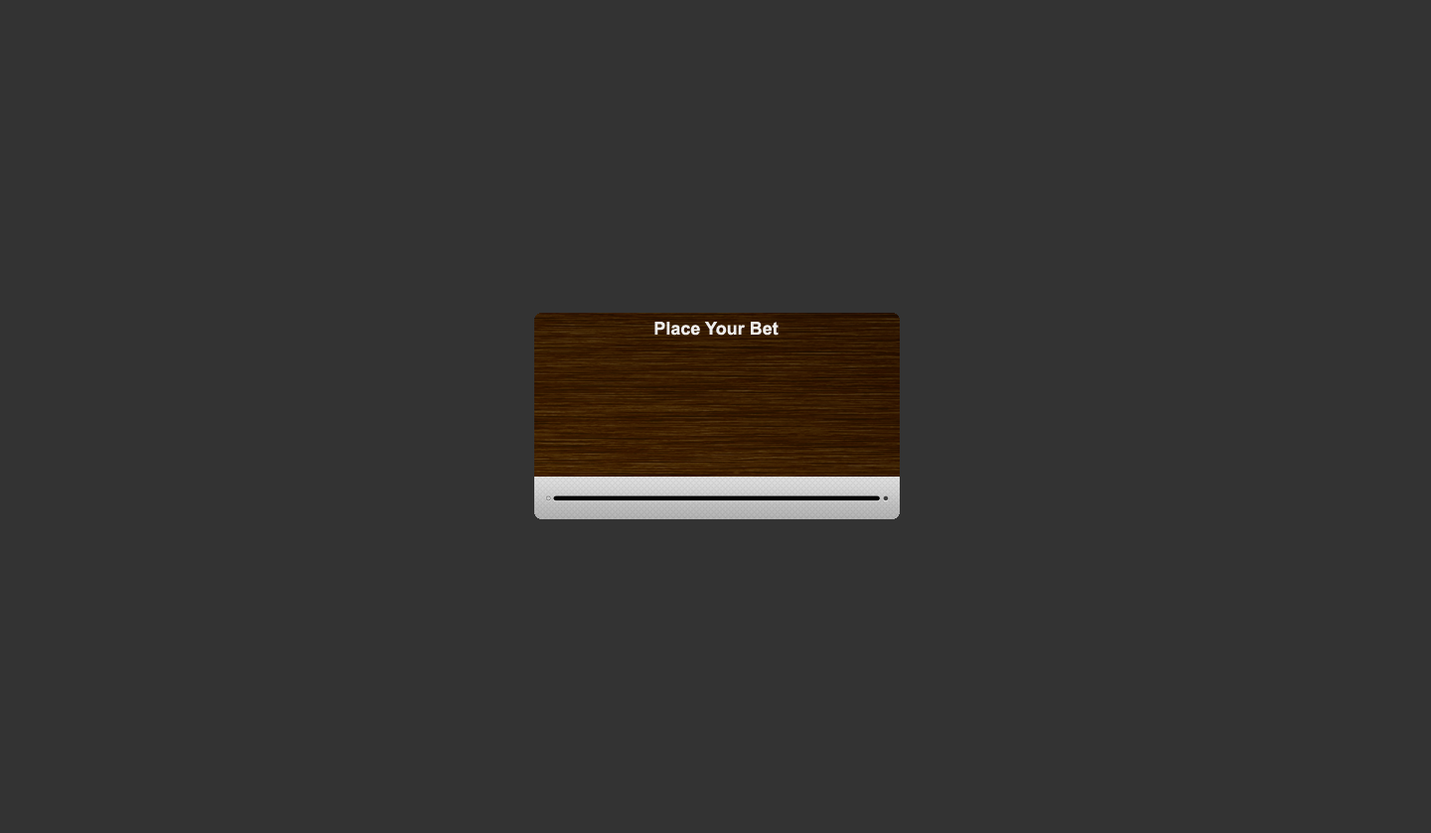
<style>
.page{position:relative;width:1431px;height:833px;background:#333333}
.page>*{position:absolute;margin:0}
.t1{font:17.9px "Arial-BoldMT";color:#eeeeee}
</style>
<div class="page">
<p class="t1" style="left:654px;top:322px;width:125px;height:14px">Place Your Bet</p>
</div>
